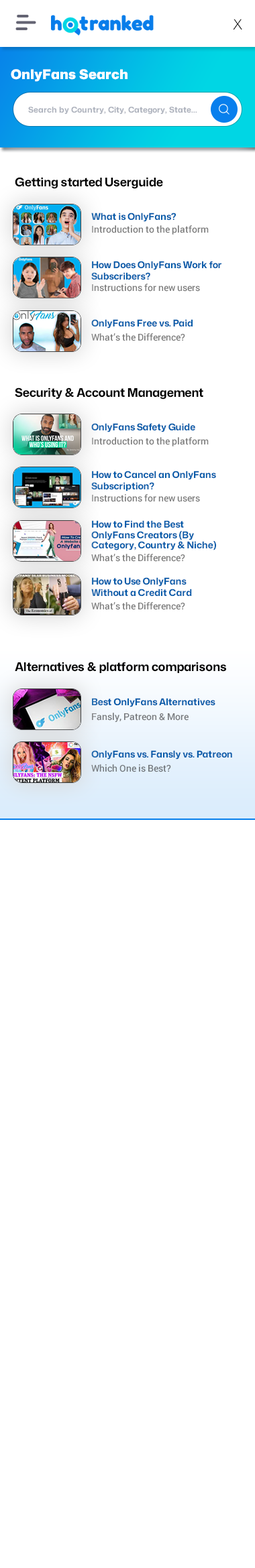
<style>
.page{position:relative;width:255px;height:1568px;background:#ffffff}
.page>*{position:absolute;margin:0}
.t1{font:14.1px "MonaSans-Light";letter-spacing:-0.01em;color:#000000}
.t2{font:13.4px "MonaSans-Black";color:#ffffff}
.t3{font:8px "MonaSans-Bold";color:#adb2bd}
.t4{font:12.1px "MonaSans-Bold";letter-spacing:-0.01em;color:#000000}
.t5{font:9.4px "MonaSans-Bold";letter-spacing:-0.01em;color:#065caa}
.t6{font:9.4px "Roboto-Medium";color:#7d7d7d}
.t7{font:9.4px/11.3px "MonaSans-Bold";letter-spacing:-0.01em;color:#065caa}
.t8{font:9.4px/10.3px "MonaSans-Bold";letter-spacing:-0.01em;color:#065caa}
.t9{font:9.4px "Roboto-Medium";color:#777a7c}
.t10{font:9.4px "Roboto-Medium";color:#72777c}
</style>
<div class="page">
<p class="t1" style="left:233px;top:19px;width:9px;height:10px">X</p>
<p class="t2" style="left:11px;top:69px;width:116px;height:13px">OnlyFans Search</p>
<p class="t3" style="left:28px;top:107px;width:169px;height:8px">Search by Country, City, Category, State...</p>
<p class="t4" style="left:15px;top:177px;width:148px;height:12px">Getting started Userguide</p>
<p class="t5" style="left:91px;top:213px;width:85px;height:9px">What is OnlyFans?</p>
<p class="t6" style="left:92px;top:225px;width:116px;height:10px">Introduction to the platform</p>
<p class="t7" style="left:91px;top:261px;width:130px;height:19px">How Does OnlyFans Work for Subscribers?</p>
<p class="t6" style="left:92px;top:284px;width:108px;height:8px">Instructions for new users</p>
<p class="t5" style="left:91px;top:319px;width:101px;height:9px">OnlyFans Free vs. Paid</p>
<p class="t6" style="left:91px;top:333px;width:94px;height:8px">What’s the Difference?</p>
<p class="t4" style="left:15px;top:387px;width:188px;height:13px">Security &amp; Account Management</p>
<p class="t5" style="left:91px;top:423px;width:104px;height:9px">OnlyFans Safety Guide</p>
<p class="t6" style="left:92px;top:437px;width:116px;height:9px">Introduction to the platform</p>
<p class="t7" style="left:91px;top:471px;width:125px;height:20px">How to Cancel an OnlyFans Subscription?</p>
<p class="t6" style="left:92px;top:494px;width:108px;height:8px">Instructions for new users</p>
<p class="t8" style="left:91px;top:520px;width:125px;height:30px">How to Find the Best OnlyFans Creators (By Category, Country &amp; Niche)</p>
<p class="t6" style="left:91px;top:554px;width:94px;height:8px">What’s the Difference?</p>
<p class="t7" style="left:91px;top:577px;width:101px;height:20px">How to Use OnlyFans Without a Credit Card</p>
<p class="t6" style="left:91px;top:602px;width:94px;height:8px">What’s the Difference?</p>
<p class="t4" style="left:15px;top:662px;width:211px;height:11px">Alternatives &amp; platform comparisons</p>
<p class="t5" style="left:92px;top:698px;width:123px;height:9px">Best OnlyFans Alternatives</p>
<p class="t9" style="left:92px;top:713px;width:96px;height:9px">Fansly, Patreon &amp; More</p>
<p class="t5" style="left:91px;top:750px;width:141px;height:10px">OnlyFans vs. Fansly vs. Patreon</p>
<p class="t10" style="left:91px;top:764px;width:80px;height:8px">Which One is Best?</p>
</div>
